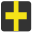
<style>
.page{position:relative;width:32px;height:32px;background:#333333}
.page>*{position:absolute;margin:0}
.t1{font:60px "Titania";letter-spacing:0.025em;color:#f5e318;scale:0.7 1}
</style>
<div class="page">
<p class="t1" style="left:5px;top:0px;width:22px;height:31px">+</p>
</div>
